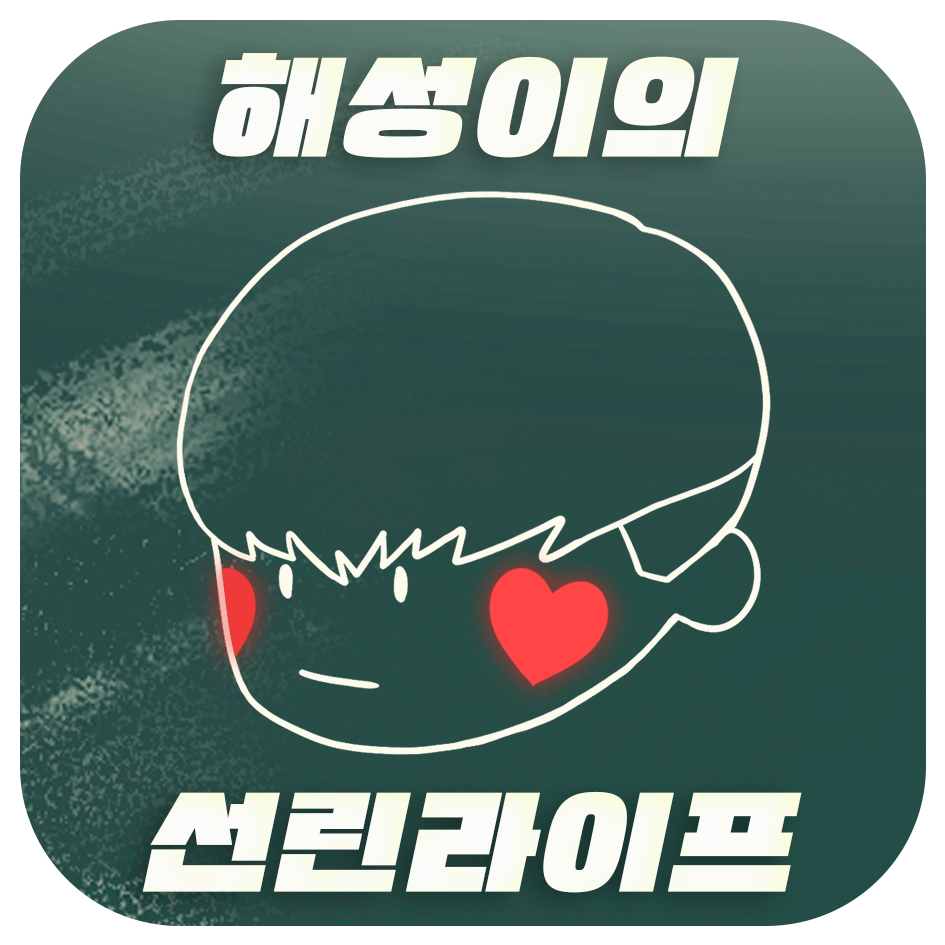
<style>
.page{position:relative;width:945px;height:945px}
.page>*{position:absolute;margin:0}
.t1{font:116.7px/735px "SDPress-aOriginal";letter-spacing:0.04em;color:#fbfcfe}
</style>
<div class="page">
<p class="t1" style="left:142px;top:53px;width:660px;height:840px;text-align:center">해성이의<br>선린라이프</p>
</div>
